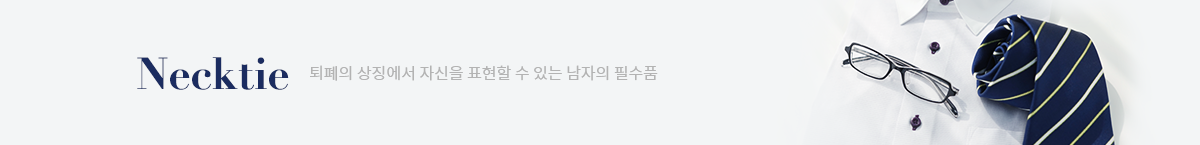
<style>
.page{position:relative;width:1200px;height:145px;background:#f3f5f6}
.page>*{position:absolute;margin:0}
.t1{font:44px "DidotLH-Bold";color:#1b2c60}
.t2{font:16px "NotoSansCJKkr-DemiLight";color:#b3b3b3}
</style>
<div class="page">
<p class="t1" style="left:137px;top:57px;width:152px;height:33px">Necktie</p>
<p class="t2" style="left:310px;top:65px;width:348px;height:16px">퇴폐의 상징에서 자신을 표현할 수 있는 남자의 필수품</p>
</div>
